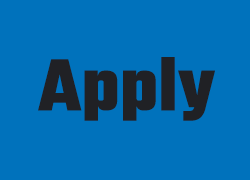
<style>
.page{position:relative;width:250px;height:180px;background:#0072bc}
.page>*{position:absolute;margin:0}
.t1{font:80px "Teko-Bold";color:#202125}
</style>
<div class="page">
<p class="t1" style="left:38px;top:57px;width:177px;height:64px">Apply</p>
</div>
